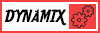
<style>
.page{position:relative;width:100px;height:33px;background:#ffffff}
.page>*{position:absolute;margin:0}
.t1{font:16.7px "AardvarkCafe";color:#000000}
</style>
<div class="page">
<p class="t1" style="left:4px;top:8px;width:63px;height:18px">DYNAMIX</p>
</div>
